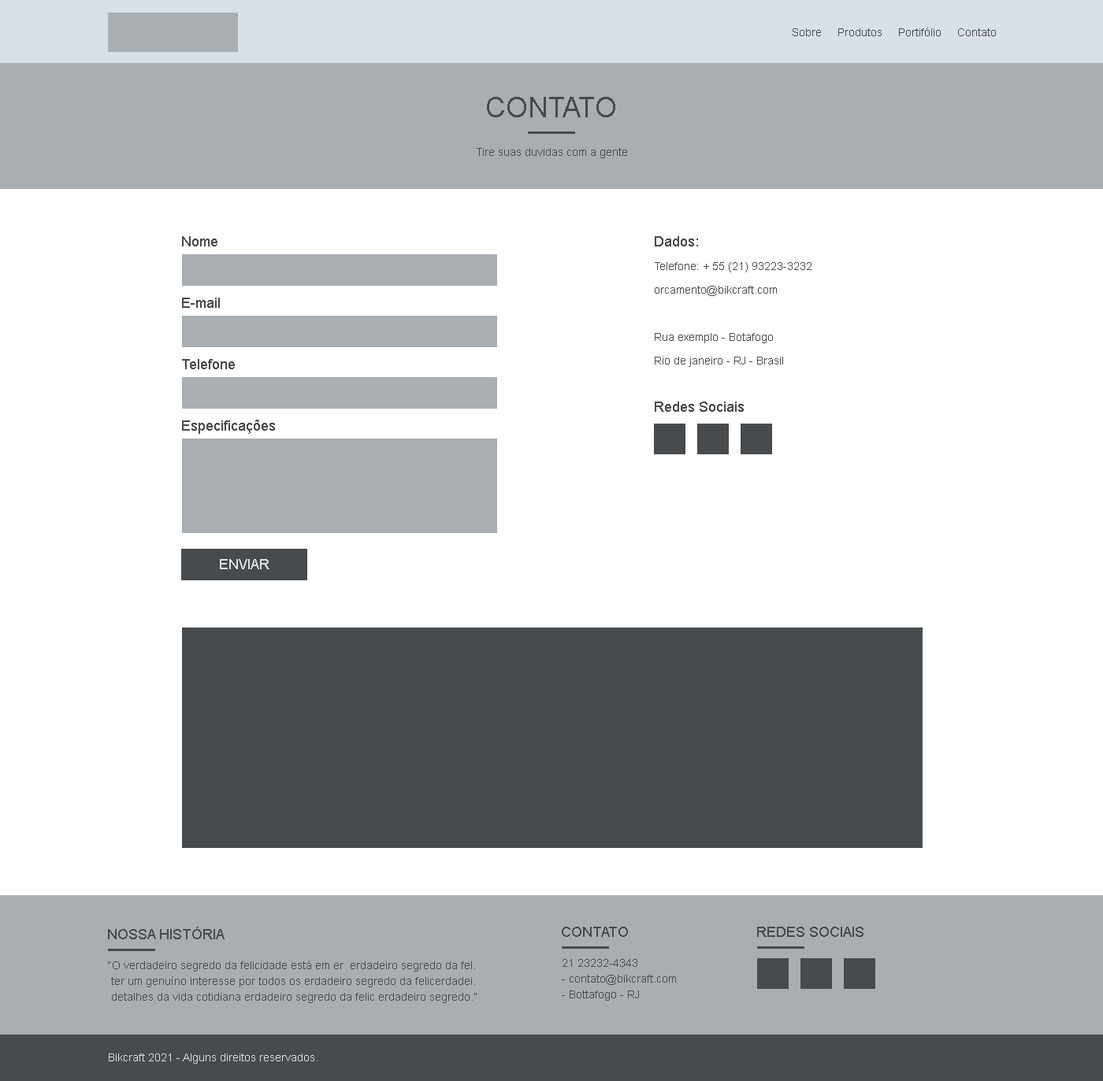
<style>
.page{position:relative;width:1103px;height:1081px;background:#ffffff}
.page>*{position:absolute;margin:0}
.t1{font:11px "ArialMT";color:#484b4d}
.t2{font:28.4px "ArialMT";color:#484b4d;text-transform:uppercase}
.t3{font:14.2px "ArialMT";color:#484b4d}
.t4{font:11px/23.6px "ArialMT";color:#484b4d}
.t5{font:14.2px/23.6px "ArialMT";color:#484b4d}
.t6{font:14.2px "ArialMT";color:#d9e0e6}
.t7{font:11px/15.8px "ArialMT";color:#484b4d}
.t8{font:11px "ArialMT";color:#d9e0e6}
</style>
<div class="page">
<p class="t1" style="left:792px;top:28px;width:204px;height:8px">Sobre     Produtos     Portifólio     Contato</p>
<p class="t2" style="left:487px;top:97px;width:128px;height:20px">CONTATO</p>
<p class="t1" style="left:477px;top:148px;width:150px;height:10px">Tire suas duvidas com a gente</p>
<p class="t3" style="left:182px;top:236px;width:35px;height:11px">Nome</p>
<p class="t4" style="left:655px;top:236px;width:156px;height:176px"><span class="t5">Dados:<br></span>Telefone: + 55 (21) 93223-3232<br>orcamento@bikcraft.com<br><br>Rua exemplo - Botafogo<br>Rio de janeiro - RJ - Brasil<br><span class="t5"><br>Redes Sociais</span></p>
<p class="t3" style="left:182px;top:298px;width:38px;height:10px">E-mail</p>
<p class="t3" style="left:182px;top:359px;width:53px;height:10px">Telefone</p>
<p class="t3" style="left:182px;top:420px;width:93px;height:14px">Especificações</p>
<p class="t6" style="left:220px;top:559px;width:49px;height:10px">ENVIAR</p>
<p class="t3" style="left:108px;top:927px;width:116px;height:13px">NOSSA HISTÓRIA</p>
<p class="t3" style="left:562px;top:927px;width:66px;height:10px">CONTATO</p>
<p class="t3" style="left:757px;top:927px;width:106px;height:10px">REDES SOCIAIS</p>
<p class="t7" style="left:108px;top:961px;width:369px;height:42px">“O verdadeiro segredo da felicidade está em er  erdadeiro segredo da fel.  <br> ter um genuíno interesse por todos os erdadeiro segredo da felicerdadei.<br> detalhes da vida cotidiana erdadeiro segredo da felic erdadeiro segredo.”</p>
<p class="t7" style="left:562px;top:959px;width:114px;height:42px">21 23232-4343<br>- contato@bikcraft.com<br>- Bottafogo - RJ</p>
<p class="t8" style="left:109px;top:1054px;width:208px;height:10px">Bikcraft 2021 - Alguns direitos reservados.</p>
</div>
